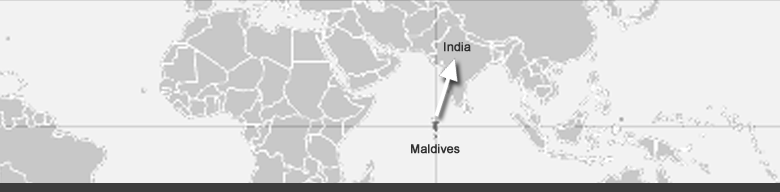
<style>
.page{position:relative;width:780px;height:192px;background:#f2f2f2}
.page>*{position:absolute;margin:0}
.t1{font:12px "ArialMT";color:#333333;font-weight:bold}
</style>
<div class="page">
<p class="t1" style="left:444px;top:42px;width:27px;height:10px">India</p>
<p class="t1" style="left:411px;top:144px;width:49px;height:10px">Maldives</p>
</div>
